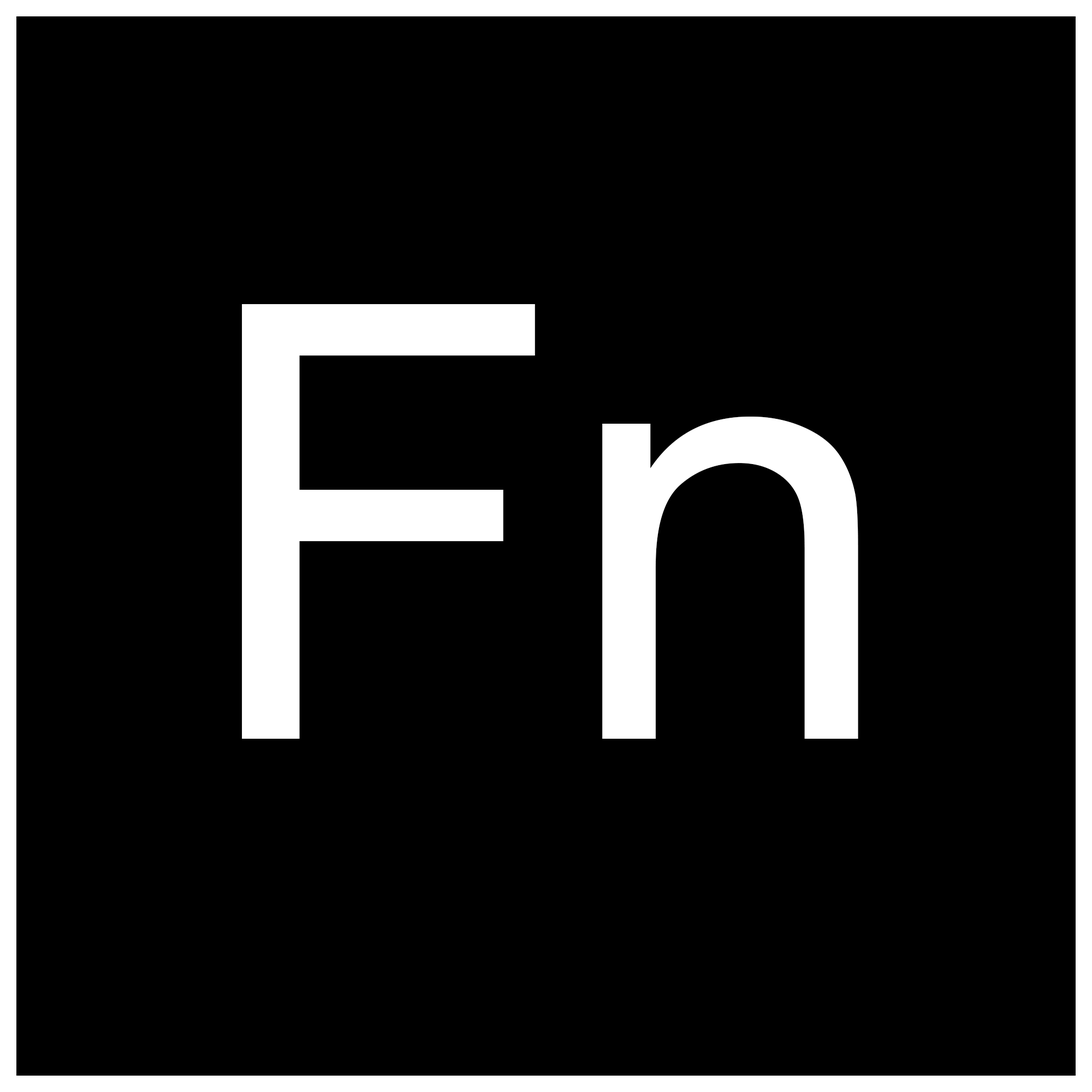
<style>
.page{position:relative;width:1092px;height:1092px;background:#000000}
.page>*{position:absolute;margin:0}
.t1{font:606.7px "ArialMT";color:#ffffff}
</style>
<div class="page">
<p class="t1" style="left:242px;top:304px;width:616px;height:435px">Fn</p>
</div>
